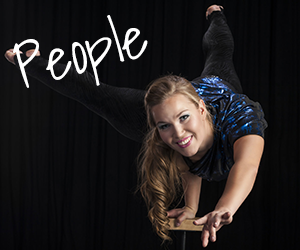
<style>
.page{position:relative;width:300px;height:250px}
.page>*{position:absolute;margin:0}
.t1{font:58.3px "ShadowsIntoLight";color:#ffffff}
</style>
<div class="page">
<p class="t1" style="left:13px;top:15px;width:135px;height:73px;rotate:-15deg">People</p>
</div>
